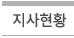
<style>
.page{position:relative;width:74px;height:38px;background:#ffffff}
.page>*{position:absolute;margin:0}
.t1{font:15px "MalgunGothicBold";letter-spacing:-0.05em;color:#4e4e4e;scale:0.95 1}
</style>
<div class="page">
<p class="t1" style="left:12px;top:13px;width:55px;height:15px">지사현황</p>
</div>
